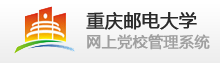
<style>
.page{position:relative;width:220px;height:63px}
.page>*{position:absolute;margin:0}
.t1{font:18px "MicrosoftYaHei";color:#2a2a2a;font-weight:bold}
.t2{font:15.1px "MicrosoftYaHei";color:#9f9f9f;font-weight:bold}
</style>
<div class="page">
<p class="t1" style="left:86px;top:12px;width:111px;height:18px">重庆邮电大学</p>
<p class="t2" style="left:87px;top:34px;width:123px;height:16px">网上党校管理系统</p>
</div>
